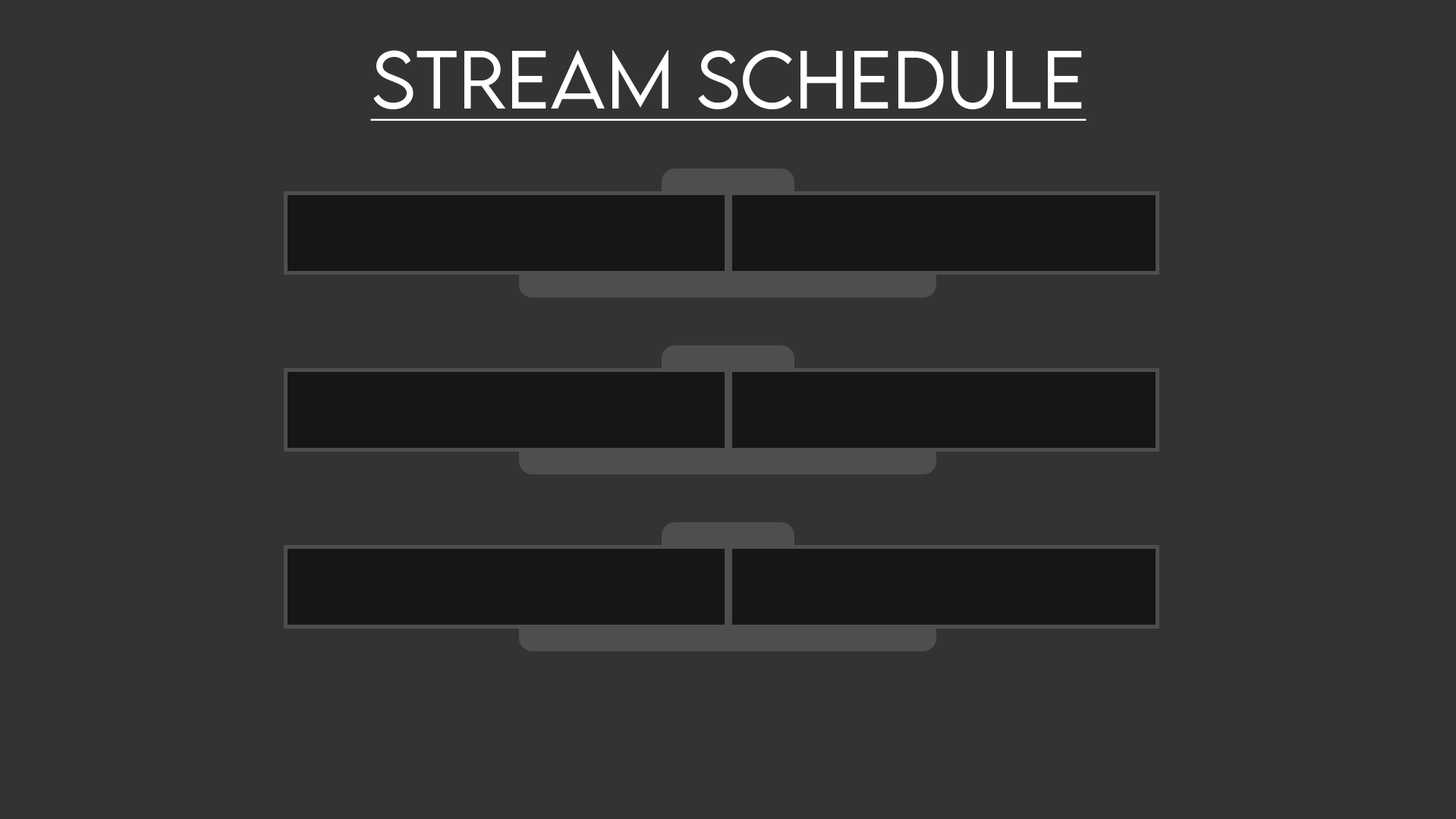
<style>
.page{position:relative;width:1456px;height:819px;background:#333333}
.page>*{position:absolute;margin:0}
.t1{font:72.9px "LEMONMILK-Light";color:#ffffff;text-decoration:underline}
</style>
<div class="page">
<p class="t1" style="left:370px;top:50px;width:717px;height:71px">Stream Schedule</p>
</div>
